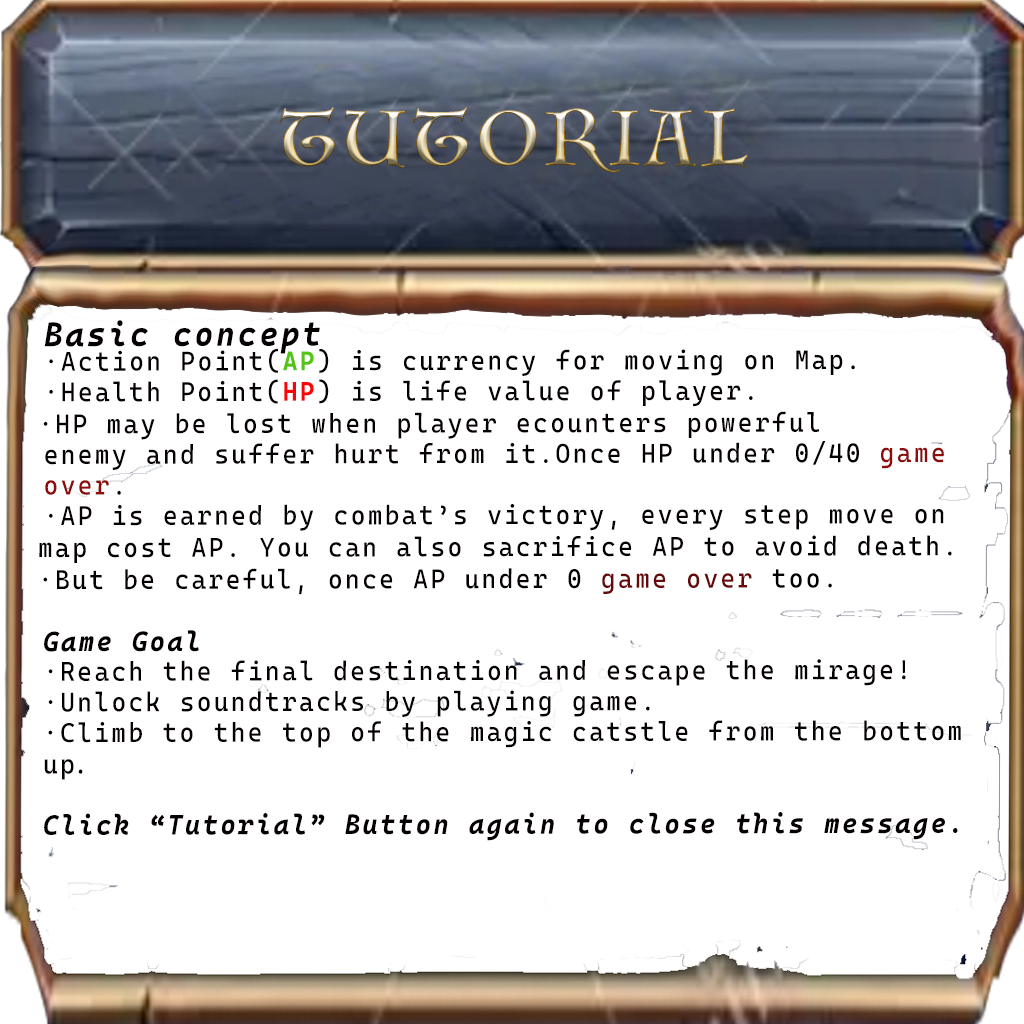
<style>
.page{position:relative;width:1024px;height:1024px;background:#ffffff}
.page>*{position:absolute;margin:0}
.t1{font:75px "Luminari-Regular";letter-spacing:0.1em}
.t2{font:26.9px/32px "CascadiaCode-Regular";letter-spacing:0.1em;color:#050000;scale:0.93 1}
.t3{font:34px/32px "CascadiaCodeItalic-BoldItalic";letter-spacing:0.1em;color:#050000;scale:0.93 1}
.t4{font:26.9px/32px "CascadiaCodeRoman-Bold";letter-spacing:0.1em;color:#54c516;scale:0.93 1}
.t5{font:26.9px/32px "CascadiaCodeRoman-Bold";letter-spacing:0.1em;color:#fa0606;scale:0.93 1}
.t6{font:26.9px/32px "CascadiaCode-Regular";letter-spacing:0.1em;color:#8e0c0c;scale:0.93 1}
.t7{font:26.9px/32px "CascadiaCode-Regular";letter-spacing:0.1em;color:#670909;scale:0.93 1}
.t8{font:28px/32px "CascadiaCodeItalic-BoldItalic";letter-spacing:0.1em;color:#050000;scale:0.93 1}
.t9{font:26.9px/32px "AdobeHeitiStd-Regular";letter-spacing:0.1em;color:#050000;scale:0.93 1}
</style>
<div class="page">
<p class="t1" style="left:279px;top:107px;width:469px;height:66px">TUTORIAL</p>
<p class="t2" style="left:39px;top:320px;width:922px;height:521px"><span class="t3">Basic concept<br></span>·Action Point(<span class="t4">AP</span>) is currency for moving on Map.<br>·Health Point(<span class="t5">HP</span>) is life value of player.<br>·HP may be lost when player ecounters powerful<br>enemy and suffer hurt from it.Once HP under 0/40 <span class="t6">game <br>over</span>.<br>·AP is earned by combat’s victory, every step move on <br>map cost AP. You can also sacrifice AP to avoid death.<br>·But be careful, once AP under 0 <span class="t7">game over</span> too.<br><span class="t8"><br>Game Goal<br></span>·Reach the final destination and escape the mirage!<br>·Unlock soundtracks by playing game.<br>·Climb to the top of the magic catstle from the bottom <br>up<span class="t9">.<br></span><span class="t8"><br>Click “Tutorial” Button again to close this message.</span></p>
</div>
